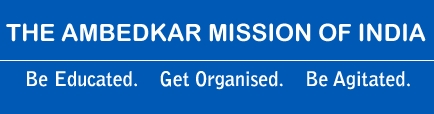
<style>
.page{position:relative;width:434px;height:114px;background:#005ab5}
.page>*{position:absolute;margin:0}
.t1{font:24px "ArialRoundedMTBold";color:#ffffff}
.t2{font:20px "BellGothicStd-Bold";color:#ffffff}
</style>
<div class="page">
<p class="t1" style="left:6px;top:23px;width:420px;height:19px">THE AMBEDKAR MISSION OF INDIA</p>
<p class="t2" style="left:27px;top:71px;width:383px;height:19px">Be Educated.    Get Organised.    Be Agitated.</p>
</div>
